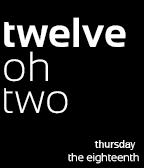
<style>
.page{position:relative;width:144px;height:168px;background:#000000}
.page>*{position:absolute;margin:0}
.t1{font:42px "Sansation-Bold";color:#ffffff}
.t2{font:42px "Sansation-Light";color:#ffffff}
.t3{font:11px "FranklinGothic-Book";color:#ffffff}
.t4{font:11px "Sansation-Light";color:#ffffff}
</style>
<div class="page">
<p class="t1" style="left:4px;top:17px;width:122px;height:30px">twelve</p>
<p class="t2" style="left:4px;top:51px;width:44px;height:31px">oh</p>
<p class="t2" style="left:4px;top:88px;width:64px;height:26px">two</p>
<p class="t3" style="left:94px;top:140px;width:42px;height:10px">thursday</p>
<p class="t4" style="left:68px;top:153px;width:71px;height:11px">the eighteenth</p>
</div>
